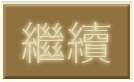
<style>
.page{position:relative;width:134px;height:82px;background:#907140}
.page>*{position:absolute;margin:0}
.t1{font:45.8px "YuGothicUI-Light";color:#e3dbbb}
</style>
<div class="page">
<p class="t1" style="left:22px;top:22px;width:89px;height:41px">繼續</p>
</div>
